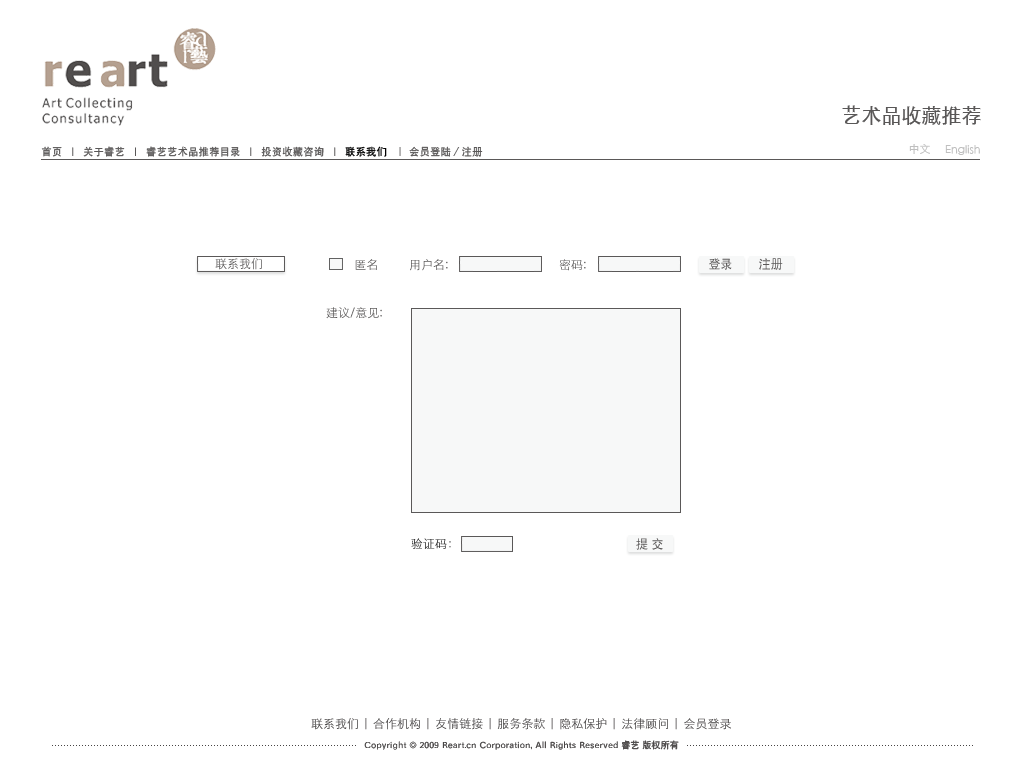
<style>
.page{position:relative;width:1024px;height:768px;background:#ffffff}
.page>*{position:absolute;margin:0}
.t1{font:20px "SIL-Hei-Med-Jian";color:#595757}
.t2{font:10px "SIL-Hei-Med-Jian";letter-spacing:0.05em;color:#5a5858}
.t3{font:10px "SIL-Hei-Med-Jian";letter-spacing:0.05em;color:#000000}
.t4{font:11px "STXihei";color:#bfbfbf}
.t5{font:12px "STXihei";color:#5a5858}
.t6{font:12px "STXihei"}
.t7{font:12px "SIL-Hei-Med-Jian";color:#5a5858}
.t8{font:12px "SIL-Hei-Med-Jian";letter-spacing:0.3em;color:#5a5858}
</style>
<div class="page">
<p class="t1" style="left:842px;top:105px;width:139px;height:20px">艺术品收藏推荐</p>
<p class="t2" style="left:41px;top:146px;width:442px;height:11px">首页  |  关于睿艺  |  睿艺艺术品推荐目录  |  投资收藏咨询  |  <span class="t3">联系我们</span>  ｜ 会员登陆／注册</p>
<p class="t4" style="left:909px;top:144px;width:21px;height:10px">中文</p>
<p class="t4" style="left:945px;top:145px;width:35px;height:10px">English</p>
<p class="t5" style="left:215px;top:258px;width:47px;height:12px">联系我们</p>
<p class="t5" style="left:355px;top:259px;width:22px;height:11px">匿名</p>
<p class="t5" style="left:410px;top:259px;width:38px;height:12px">用户名:</p>
<p class="t6" style="left:559px;top:259px;width:27px;height:12px">密码:</p>
<p class="t7" style="left:709px;top:258px;width:23px;height:12px">登录</p>
<p class="t7" style="left:759px;top:258px;width:24px;height:12px">注册</p>
<p class="t5" style="left:326px;top:307px;width:56px;height:12px">建议/意见:</p>
<p class="t6" style="left:411px;top:538px;width:40px;height:11px">验证码：</p>
<p class="t8" style="left:636px;top:538px;width:27px;height:12px">提交</p>
</div>
